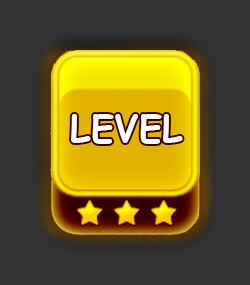
<style>
.page{position:relative;width:250px;height:285px;background:#333333}
.page>*{position:absolute;margin:0}
.t1{font:37.3px "ComicSansMS-Bold";color:#ffffff}
</style>
<div class="page">
<p class="t1" style="left:71px;top:114px;width:112px;height:30px">LEVEL</p>
</div>
